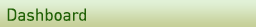
<style>
.page{position:relative;width:256px;height:27px}
.page>*{position:absolute;margin:0}
.t1{font:17px "DIN-Regular";color:#216106}
</style>
<div class="page">
<p class="t1" style="left:7px;top:8px;width:79px;height:13px">Dashboard</p>
</div>
